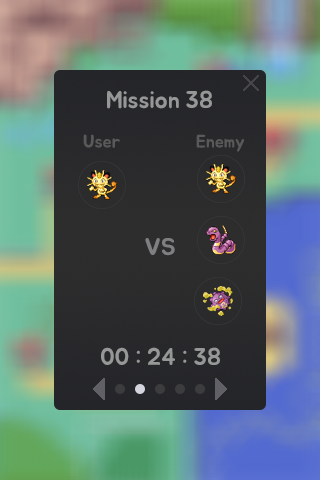
<style>
.page{position:relative;width:320px;height:480px}
.page>*{position:absolute;margin:0}
.t1{font:24px "BMJUA";color:#969797}
.t2{font:18px "BMJUA";color:#585959}
.t3{font:24px "BMJUA";color:#7e7f80}
</style>
<div class="page">
<p class="t1" style="left:107px;top:90px;width:105px;height:19px">Mission 38</p>
<p class="t2" style="left:83px;top:134px;width:37px;height:14px">User</p>
<p class="t2" style="left:196px;top:134px;width:48px;height:18px">Enemy</p>
<p class="t3" style="left:145px;top:238px;width:30px;height:18px">VS</p>
<p class="t1" style="left:101px;top:347px;width:119px;height:18px">00 : 24 : 38</p>
</div>
